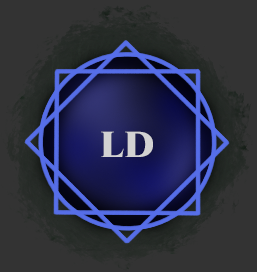
<style>
.page{position:relative;width:257px;height:272px;background:#333333}
.page>*{position:absolute;margin:0}
.t1{font:36px "CinzelRoman-Black";color:#d2d2d2}
</style>
<div class="page">
<p class="t1" style="left:101px;top:131px;width:52px;height:26px">LD</p>
</div>
